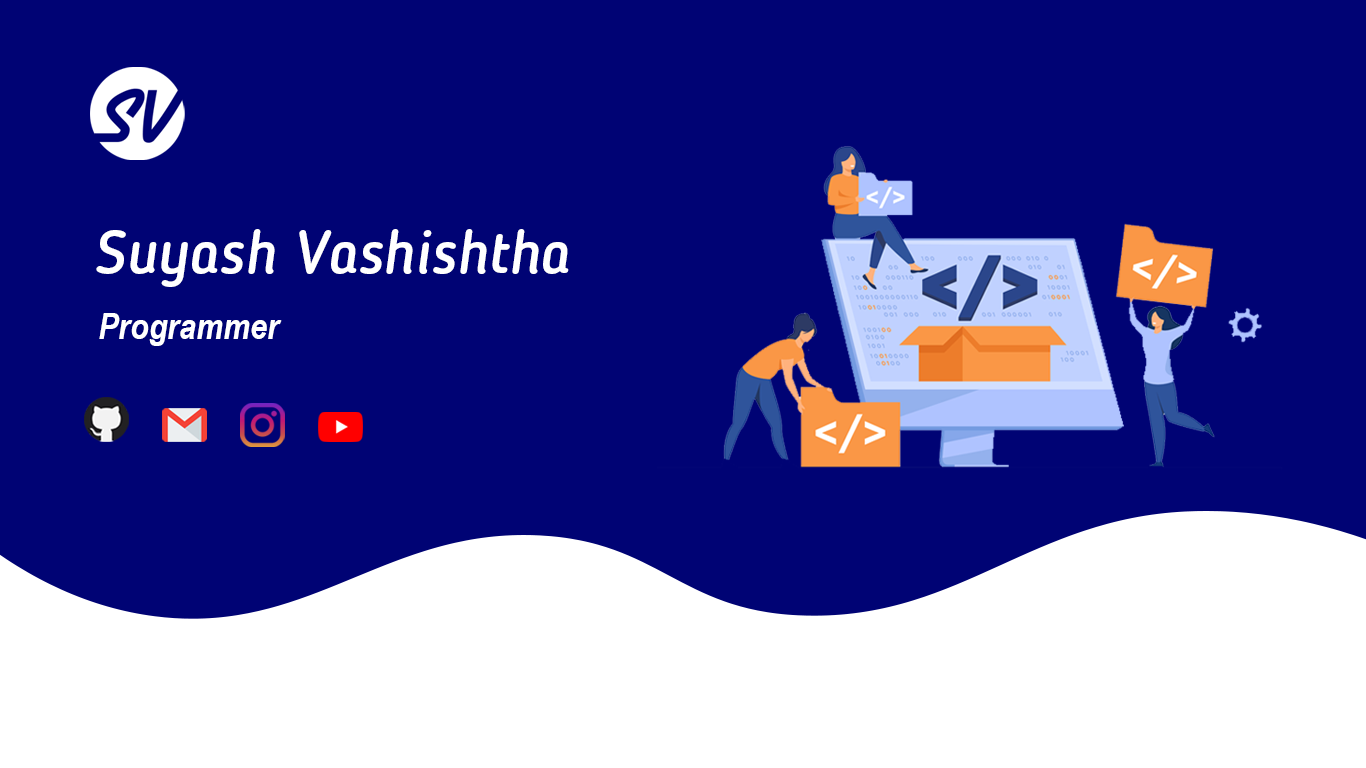
<style>
.page{position:relative;width:1366px;height:768px;background:#000374}
.page>*{position:absolute;margin:0}
.t1{font:60px "BloggerSans-MediumItalic";color:#ffffff}
.t2{font:37.1px "ArialNarrow-BoldItalic";color:#ffffff}
</style>
<div class="page">
<p class="t1" style="left:96px;top:229px;width:473px;height:58px">Suyash Vashishtha</p>
<p class="t2" style="left:99px;top:313px;width:183px;height:33px">Programmer</p>
</div>
